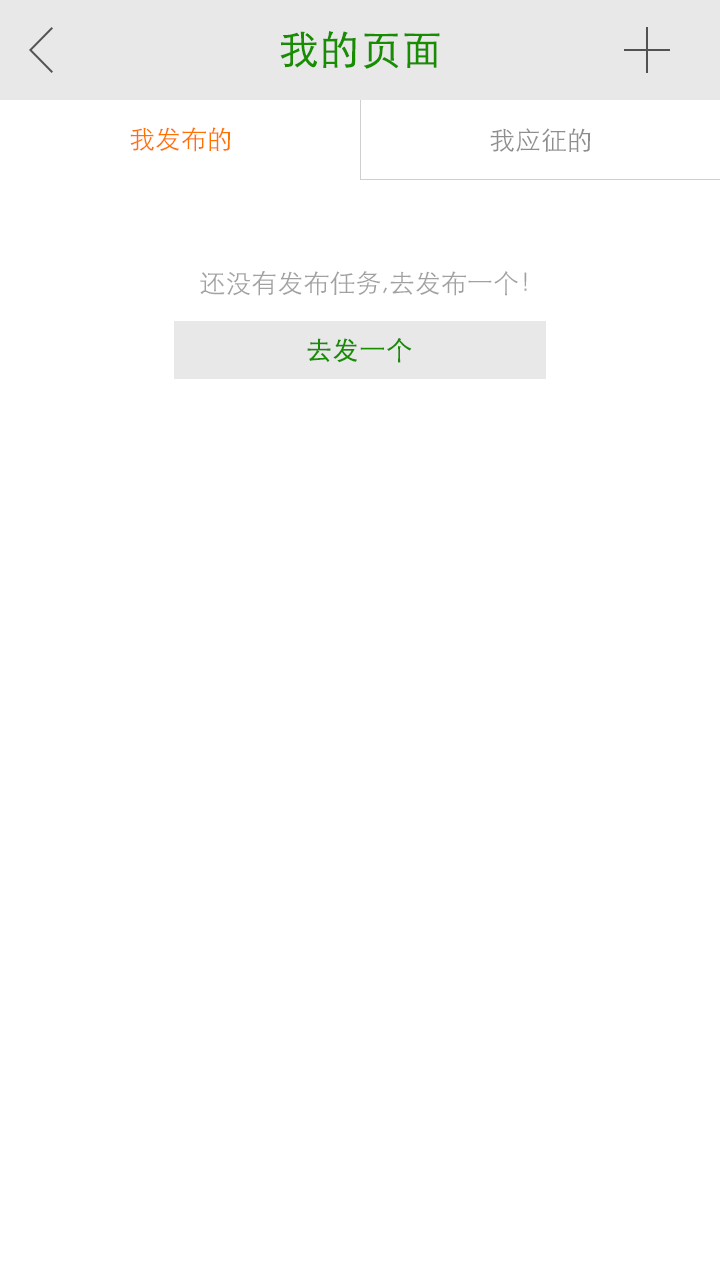
<style>
.page{position:relative;width:720px;height:1280px;background:#ffffff}
.page>*{position:absolute;margin:0}
.t1{font:40px "STXihei";color:#178d00;font-weight:bold}
.t2{font:26px "STXihei";color:#ff7200}
.t3{font:26px "STXihei";color:#8e8e8e}
.t4{font:26px "STXihei";color:#a1a1a1}
.t5{font:26px "STXihei";color:#178d00;font-weight:bold}
</style>
<div class="page">
<p class="t1" style="left:280px;top:31px;width:160px;height:38px">我的页面</p>
<p class="t2" style="left:130px;top:127px;width:101px;height:25px">我发布的</p>
<p class="t3" style="left:490px;top:128px;width:101px;height:24px">我应征的</p>
<p class="t4" style="left:200px;top:271px;width:327px;height:25px">还没有发布任务,去发布一个！</p>
<p class="t5" style="left:307px;top:338px;width:105px;height:25px">去发一个</p>
</div>
